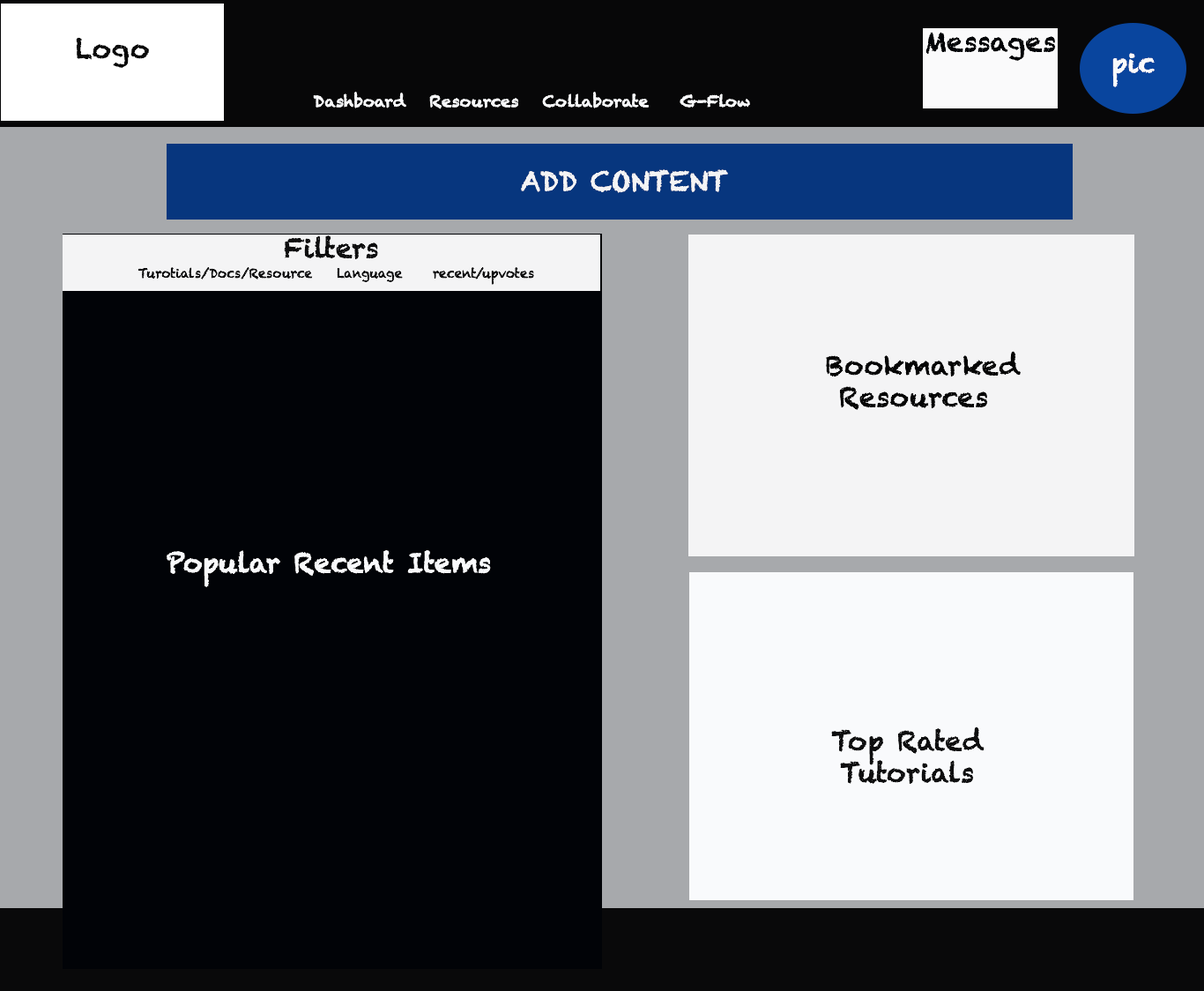
<style>
.page{position:relative;width:1204px;height:991px;background:#010307}
.page>*{position:absolute;margin:0}
.t1{font:26.4px "Chalkduster";color:#010307}
.t2{font:26.4px "Chalkduster";color:#fafafb}
.t3{font:15.9px "Chalkduster";color:#f9fafc}
.t4{font:26.4px "Chalkduster";color:#f9fafc}
.t5{font:26.4px "Chalkduster";color:#f4f4f5}
.t6{font:26.4px "Chalkduster";color:#0e0e0f}
.t7{font:12.3px "Chalkduster";color:#0e0e0f}
.t8{font:26.4px "Chalkduster";color:#050505}
</style>
<div class="page">
<p class="t1" style="left:925px;top:32px;width:131px;height:29px">Messages</p>
<p class="t2" style="left:1112px;top:53px;width:42px;height:34px">pic</p>
<p class="t3" style="left:313px;top:92px;width:437px;height:17px"><span class="t4">           </span>Dashboard   Resources   Collaborate    G-Flow</p>
<p class="t5" style="left:521px;top:169px;width:207px;height:24px">ADD CONTENT</p>
<p class="t6" style="left:284px;top:235px;width:94px;height:24px">Filters</p>
<p class="t7" style="left:138px;top:267px;width:396px;height:18px"><span class="t6"><br></span>Turotials/Docs/Resource    Language     recent/upvotes</p>
<p class="t8" style="left:826px;top:351px;width:195px;height:59px;text-align:center">Bookmarked <br>  Resources</p>
<p class="t4" style="left:167px;top:550px;width:324px;height:37px">Popular Recent Items</p>
<p class="t6" style="left:831px;top:726px;width:153px;height:57px;text-align:center">Top Rated<br>Tutorials</p>
</div>
